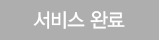
<style>
.page{position:relative;width:159px;height:40px;background:#aeaeae}
.page>*{position:absolute;margin:0}
.t1{font:20px "YDVYGO33";letter-spacing:-0.025em;color:#ffffff;scale:0.95 1}
</style>
<div class="page">
<p class="t1" style="left:33px;top:11px;width:92px;height:18px">서비스 완료</p>
</div>
